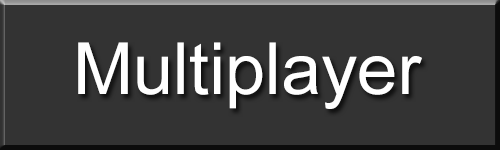
<style>
.page{position:relative;width:500px;height:150px;background:#333333}
.page>*{position:absolute;margin:0}
.t1{font:72px "ArialMT";color:#ffffff}
</style>
<div class="page">
<p class="t1" style="left:78px;top:42px;width:344px;height:67px">Multiplayer</p>
</div>
